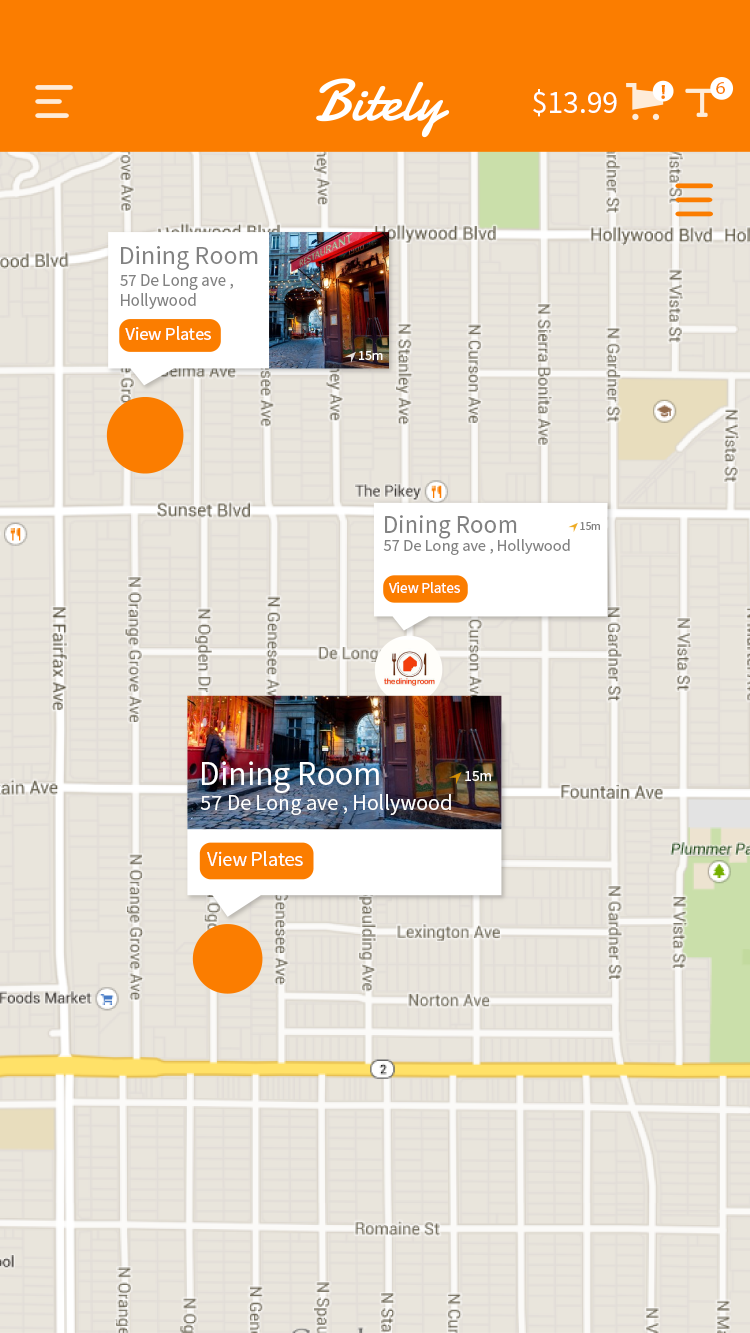
<style>
.page{position:relative;width:750px;height:1333px;background:#e9e5dc}
.page>*{position:absolute;margin:0}
.t1{font:31.7px "SourceSansPro-Regular";color:#ffffff}
.t2{font:20.5px "MyriadPro-Bold";color:#fb7d00}
.t3{font:18.6px "MyriadPro-Regular";color:#fb7d00}
.t4{font:26px "SourceSansPro-Regular";color:#828282}
.t5{font:17px "SourceSansPro-Regular";color:#828282}
.t6{font:18.4px "SourceSansPro-Regular";letter-spacing:-0.011em;color:#ffffff}
.t7{font:13.8px "SourceSansPro-Regular";color:#ffffff}
.t8{font:25.1px "SourceSansPro-Regular";color:#828282}
.t9{font:11.5px "SourceSansPro-Regular";color:#828282}
.t10{font:16.4px "SourceSansPro-Regular";color:#828282}
.t11{font:15.3px "SourceSansPro-Regular";letter-spacing:-0.011em;color:#ffffff}
.t12{font:33.7px "SourceSansPro-Regular";color:#ffffff}
.t13{font:15.4px "SourceSansPro-Regular";color:#ffffff}
.t14{font:22px "SourceSansPro-Regular";color:#ffffff}
.t15{font:20.6px "SourceSansPro-Regular";letter-spacing:-0.011em;color:#ffffff}
</style>
<div class="page">
<p class="t1" style="left:533px;top:89px;width:84px;height:28px">$13.99</p>
<p class="t2" style="left:661px;top:85px;width:4px;height:14px">!</p>
<p class="t3" style="left:716px;top:82px;width:9px;height:12px">6</p>
<p class="t4" style="left:121px;top:246px;width:137px;height:24px">Dining Room</p>
<p class="t5" style="left:120px;top:274px;width:113px;height:35px">57 De Long ave , <br>Hollywood</p>
<p class="t6" style="left:125px;top:326px;width:86px;height:14px">View Plates</p>
<p class="t7" style="left:359px;top:351px;width:24px;height:9px">15m</p>
<p class="t8" style="left:385px;top:515px;width:132px;height:24px">Dining Room</p>
<p class="t9" style="left:580px;top:522px;width:20px;height:8px">15m</p>
<p class="t10" style="left:383px;top:539px;width:187px;height:16px">57 De Long ave , Hollywood</p>
<p class="t11" style="left:389px;top:582px;width:71px;height:11px">View Plates</p>
<p class="t12" style="left:202px;top:761px;width:177px;height:32px">Dining Room</p>
<p class="t13" style="left:465px;top:771px;width:26px;height:10px">15m</p>
<p class="t14" style="left:200px;top:794px;width:251px;height:21px">57 De Long ave , Hollywood</p>
<p class="t15" style="left:207px;top:851px;width:96px;height:15px">View Plates</p>
</div>
